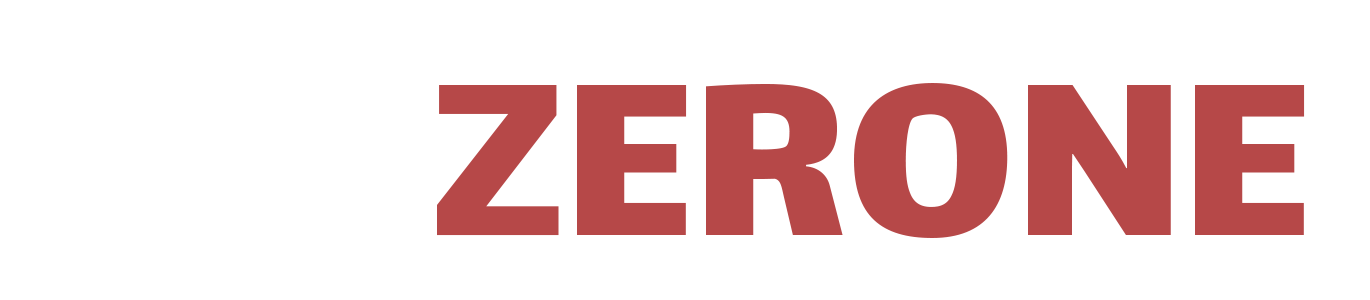
<style>
.page{position:relative;width:1370px;height:300px;background:#ffffff}
.page>*{position:absolute;margin:0}
.t1{font:263px "Lalezar-Regular";color:#b64848}
</style>
<div class="page">
<p class="t1" style="left:437px;top:83px;width:868px;height:155px">ZERONE</p>
</div>
